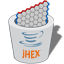
<style>
.page{position:relative;width:64px;height:64px;background:#ffffff}
.page>*{position:absolute;margin:0}
.t1{font:8.9px "Calibri-Bold";color:#e77224}
</style>
<div class="page">
<p class="t1" style="left:22px;top:49px;width:18px;height:10px">jHEX</p>
</div>
